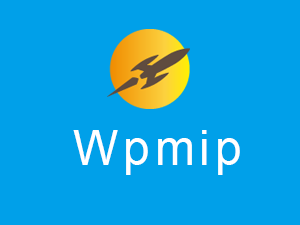
<style>
.page{position:relative;width:300px;height:225px;background:#00a0e9}
.page>*{position:absolute;margin:0}
.t1{font:48px "ArialMT";letter-spacing:0.1em;color:#ffffff}
</style>
<div class="page">
<p class="t1" style="left:73px;top:130px;width:167px;height:45px">Wpmip</p>
</div>
